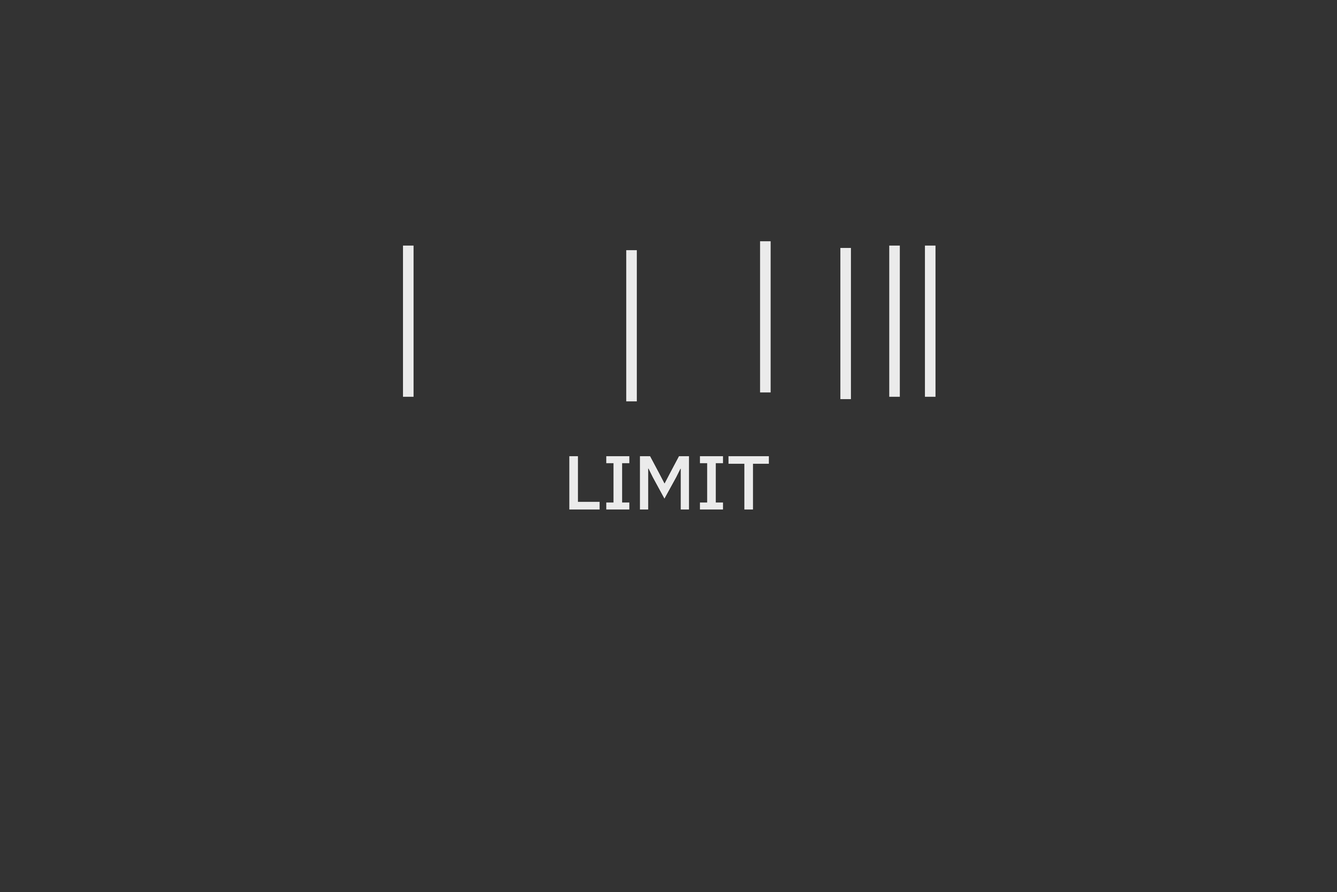
<style>
.page{position:relative;width:1337px;height:892px;background:#333333}
.page>*{position:absolute;margin:0}
.t1{font:76.4px "IBMPlexSans-Medium";color:#ebebeb}
</style>
<div class="page">
<p class="t1" style="left:569px;top:456px;width:200px;height:53px">LIMIT</p>
</div>
